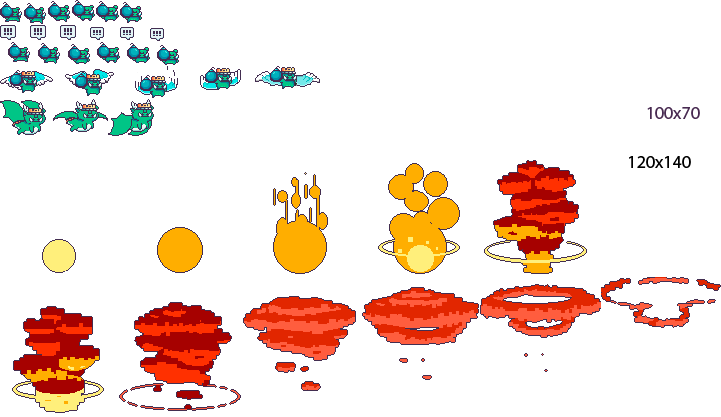
<style>
.page{position:relative;width:721px;height:417px;background:#ffffff}
.page>*{position:absolute;margin:0}
.t1{font:18px "MyriadPro-Regular";color:#482a51}
.t2{font:18px "MyriadPro-Regular";color:#000000}
</style>
<div class="page">
<p class="t1" style="left:647px;top:107px;width:53px;height:12px">100x70</p>
<p class="t2" style="left:629px;top:156px;width:62px;height:12px">120x140</p>
</div>
